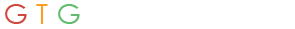
<style>
.page{position:relative;width:295px;height:29px;background:#ffffff}
.page>*{position:absolute;margin:0}
.t1{font:28px "CenturyGothic";color:#d14841}
.t2{font:28px "CenturyGothic";color:#fba026}
.t3{font:28px "CenturyGothic";color:#61bd6d}
</style>
<div class="page">
<p class="t1" style="left:5px;top:4px;width:22px;height:20px">G</p>
<p class="t2" style="left:36px;top:4px;width:12px;height:20px">T</p>
<p class="t3" style="left:58px;top:4px;width:22px;height:20px">G</p>
</div>
